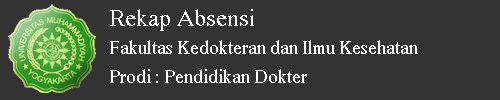
<style>
.page{position:relative;width:500px;height:100px;background:#333333}
.page>*{position:absolute;margin:0}
.t1{font:24px "MS Serif";color:#fefffd}
.t2{font:18px "MS Serif";color:#ffffff}
.t3{font:18px "MS Serif";color:#fcfcfc}
</style>
<div class="page">
<p class="t1" style="left:110px;top:9px;width:144px;height:22px">Rekap Absensi</p>
<p class="t2" style="left:110px;top:40px;width:308px;height:14px">Fakultas Kedokteran dan Ilmu Kesehatan</p>
<p class="t3" style="left:110px;top:69px;width:197px;height:14px">Prodi : Pendidikan Dokter</p>
</div>
